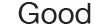
<style>
.page{position:relative;width:109px;height:28px;background:#ffffff}
.page>*{position:absolute;margin:0}
.t1{font:30px "HelveticaNeue";color:#242424}
</style>
<div class="page">
<p class="t1" style="left:18px;top:2px;width:73px;height:22px">Good</p>
</div>
